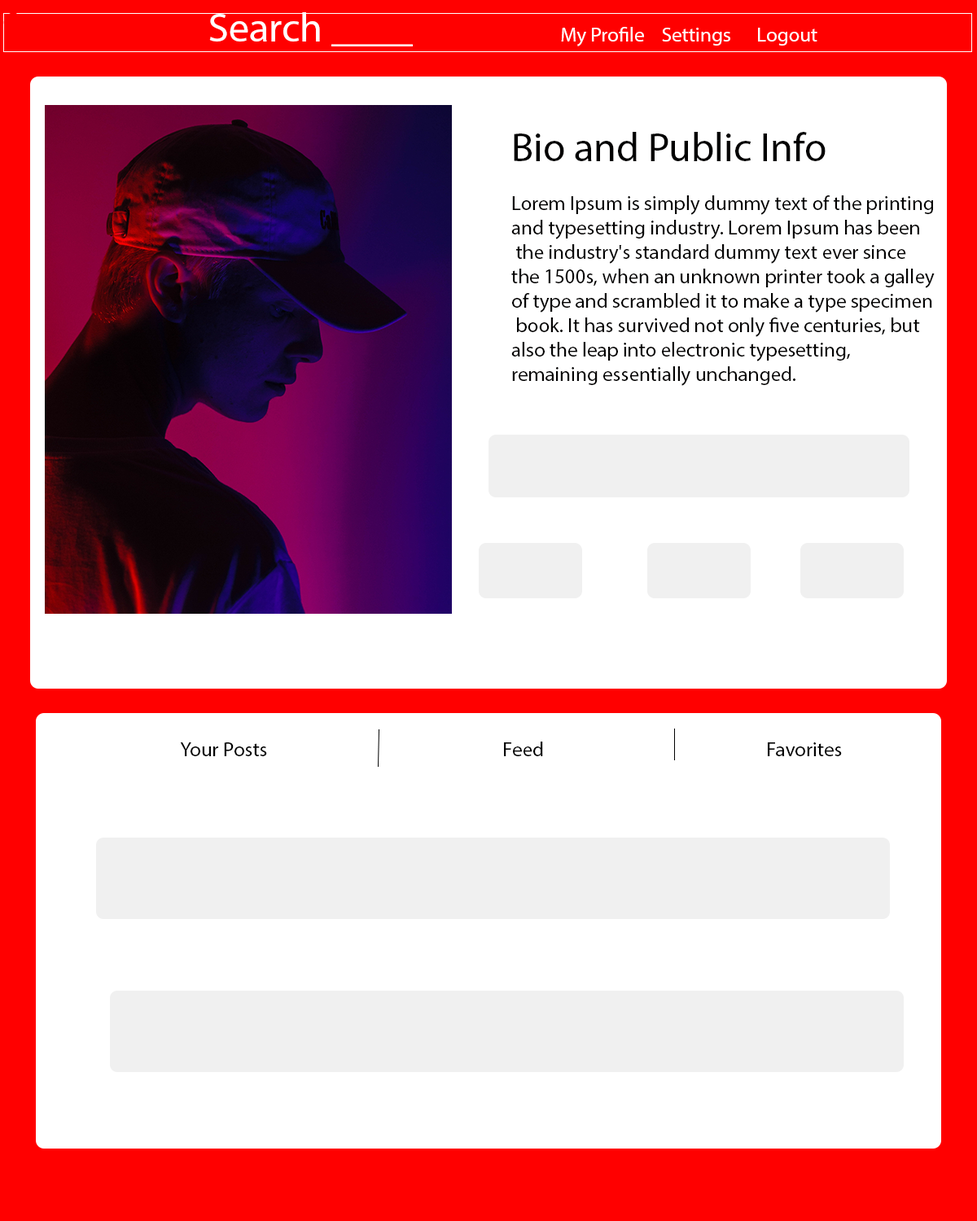
<style>
.page{position:relative;width:977px;height:1221px;background:#ffffff}
.page>*{position:absolute;margin:0}
.t1{font:20.3px "MyriadPro-Regular";color:#ffffff}
.t2{font:9.8px "MyriadPro-Regular";color:#ff0000}
.t3{font:9.8px "MyriadPro-Regular";color:#ffffff}
.t4{font:20.3px "MyriadPro-Regular";color:#020101}
.t5{font:9.8px "MyriadPro-Regular";color:#020101}
.t6{font:20.3px "MyriadPro-Regular";color:#000000}
</style>
<div class="page">
<p class="t1" style="left:3px;top:12px;width:814px;height:34px"><span class="t2">f          </span><span class="t3">Search ____      </span>My Profile    Settings      Logout</p>
<p class="t4" style="left:511px;top:132px;width:423px;height:254px"><span class="t5">Bio and Public Info<br></span><br>Lorem Ipsum is simply dummy text of the printing <br>and typesetting industry. Lorem Ipsum has been<br> the industry's standard dummy text ever since <br>the 1500s, when an unknown printer took a galley <br>of type and scrambled it to make a type specimen<br> book. It has survived not only five centuries, but <br>also the leap into electronic typesetting, <br>remaining essentially unchanged.</p>
<p class="t6" style="left:180px;top:741px;width:662px;height:15px">Your Posts         Feed        Favorites</p>
</div>
